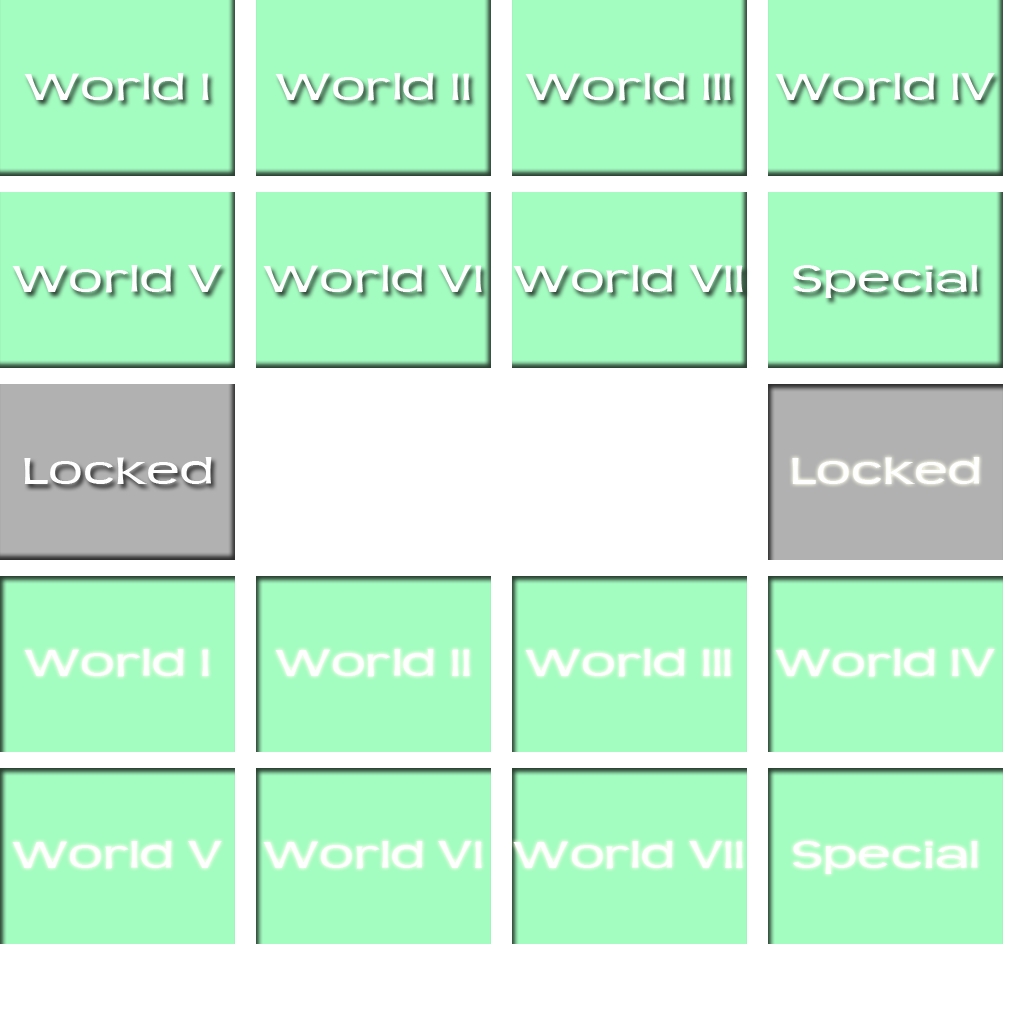
<style>
.page{position:relative;width:1024px;height:1024px;background:#a3fcc0}
.page>*{position:absolute;margin:0}
.t1{font:42px "Teen";color:#fefefe;scale:1.43 1}
</style>
<div class="page">
<p class="t1" style="left:24px;top:73px;width:185px;height:28px">World I</p>
<p class="t1" style="left:275px;top:73px;width:195px;height:28px">World II</p>
<p class="t1" style="left:525px;top:73px;width:206px;height:28px">World III</p>
<p class="t1" style="left:775px;top:73px;width:220px;height:28px">World IV</p>
<p class="t1" style="left:12px;top:265px;width:210px;height:28px">World V</p>
<p class="t1" style="left:263px;top:265px;width:219px;height:28px">World VI</p>
<p class="t1" style="left:513px;top:265px;width:230px;height:28px">World VII</p>
<p class="t1" style="left:793px;top:265px;width:185px;height:33px">Special</p>
<p class="t1" style="left:24px;top:457px;width:188px;height:27px">Locked</p>
<p class="t1" style="left:792px;top:457px;width:188px;height:27px">Locked</p>
<p class="t1" style="left:24px;top:649px;width:185px;height:28px">World I</p>
<p class="t1" style="left:275px;top:649px;width:195px;height:28px">World II</p>
<p class="t1" style="left:525px;top:649px;width:206px;height:28px">World III</p>
<p class="t1" style="left:775px;top:649px;width:220px;height:28px">World IV</p>
<p class="t1" style="left:12px;top:841px;width:210px;height:28px">World V</p>
<p class="t1" style="left:263px;top:841px;width:219px;height:28px">World VI</p>
<p class="t1" style="left:513px;top:841px;width:230px;height:28px">World VII</p>
<p class="t1" style="left:793px;top:841px;width:185px;height:33px">Special</p>
</div>
